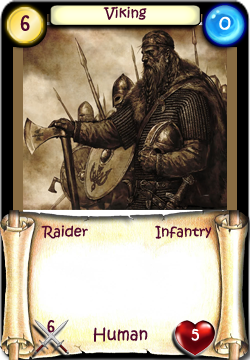
<style>
.page{position:relative;width:250px;height:360px}
.page>*{position:absolute;margin:0}
.t1{font:14px "KristenITC-Regular";color:#51092d}
.t2{font:20px "KristenITC-Regular";color:#51092d}
.t3{font:20px "KristenITC-Regular";color:#ffffff}
.t4{font:16px "KristenITC-Regular";color:#51092d}
.t5{font:16px "KristenITC-Regular";color:#fefefe}
</style>
<div class="page">
<p class="t1" style="left:103px;top:6px;width:44px;height:14px">Viking</p>
<p class="t2" style="left:20px;top:15px;width:10px;height:16px">6</p>
<p class="t3" style="left:219px;top:16px;width:12px;height:14px">0</p>
<p class="t1" style="left:41px;top:225px;width:47px;height:14px">Raider</p>
<p class="t1" style="left:155px;top:225px;width:57px;height:14px">Infantry</p>
<p class="t4" style="left:47px;top:320px;width:8px;height:13px">6</p>
<p class="t4" style="left:93px;top:327px;width:55px;height:15px">Human</p>
<p class="t5" style="left:191px;top:328px;width:8px;height:13px">5</p>
</div>
